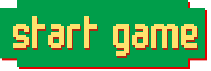
<style>
.page{position:relative;width:211px;height:71px;background:#009e4a}
.page>*{position:absolute;margin:0}
.t1{font:43.3px "Bandit";color:#ffe26d}
</style>
<div class="page">
<p class="t1" style="left:13px;top:16px;width:184px;height:40px">start game</p>
</div>
